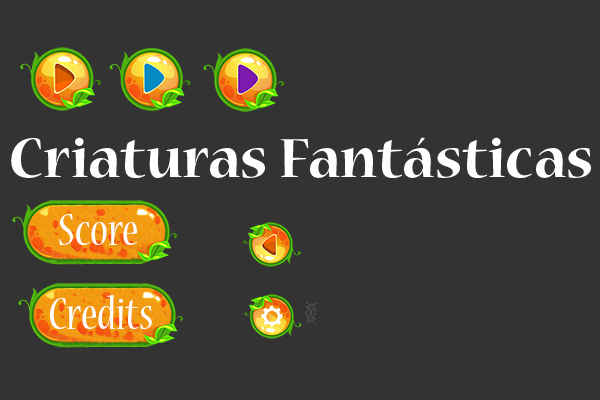
<style>
.page{position:relative;width:600px;height:400px;background:#333333}
.page>*{position:absolute;margin:0}
.t1{font:61.1px "NuevaStd-Bold";color:#ffffff}
.t2{font:50px "NuevaStd-Cond";color:#ffffff}
</style>
<div class="page">
<p class="t1" style="left:11px;top:137px;width:580px;height:41px">Criaturas Fantásticas</p>
<p class="t2" style="left:59px;top:214px;width:78px;height:31px">Score</p>
<p class="t2" style="left:50px;top:295px;width:102px;height:34px">Credits</p>
</div>
